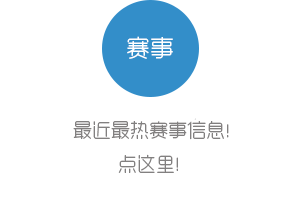
<style>
.page{position:relative;width:300px;height:205px;background:#ffffff}
.page>*{position:absolute;margin:0}
.t1{font:24px "RTWSYueGoTrial-Light";color:#ffffff}
.t2{font:19px "RTWSYueGoTrial-Light";color:#828080}
</style>
<div class="page">
<p class="t1" style="left:127px;top:36px;width:46px;height:23px">赛事</p>
<p class="t2" style="left:73px;top:121px;width:156px;height:52px;text-align:center">最近最热赛事信息！ 点这里!</p>
</div>
